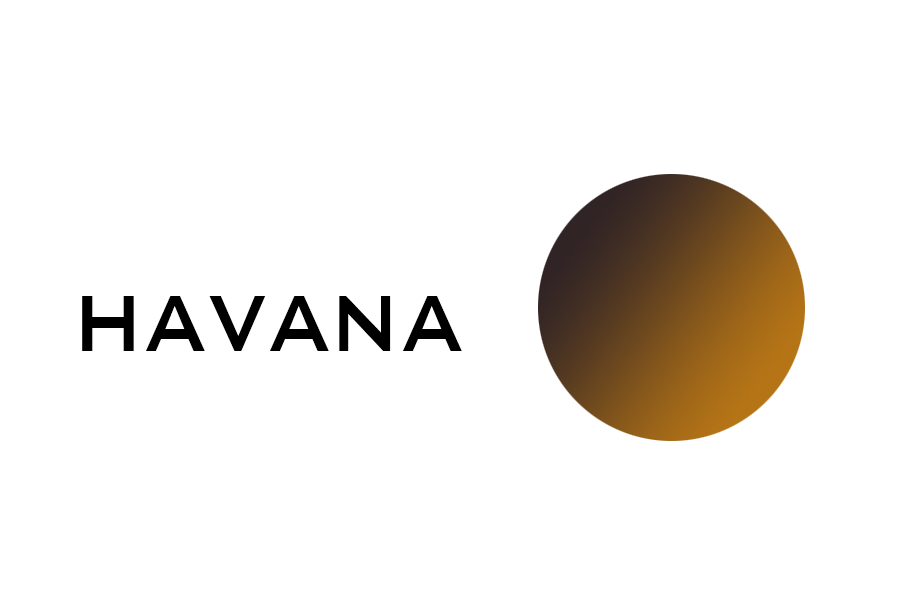
<style>
.page{position:relative;width:900px;height:600px;background:#ffffff}
.page>*{position:absolute;margin:0}
.t1{font:130px "BankGothicBT-Medium";color:#000000;scale:0.75 1}
</style>
<div class="page">
<p class="t1" style="left:82px;top:296px;width:380px;height:55px">havana</p>
</div>
